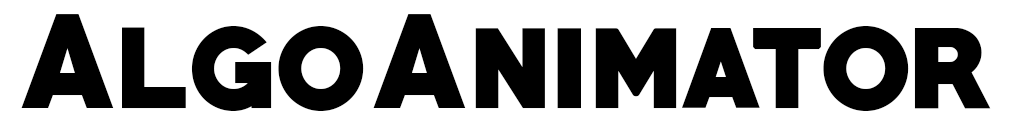
<style>
.page{position:relative;width:1010px;height:128px;background:#ffffff}
.page>*{position:absolute;margin:0}
.t1{font:121px "PRIMETIME-Regular";color:#000000}
</style>
<div class="page">
<p class="t1" style="left:21px;top:14px;width:970px;height:97px">AlgoAnimator</p>
</div>
